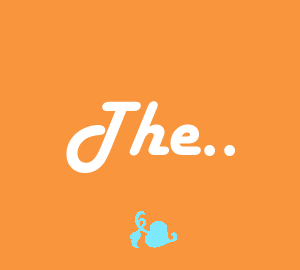
<style>
.page{position:relative;width:300px;height:270px;background:#f8953d}
.page>*{position:absolute;margin:0}
.t1{font:80px "HarlowSolid";color:#ffffff}
</style>
<div class="page">
<p class="t1" style="left:66px;top:101px;width:169px;height:72px">The..</p>
</div>
